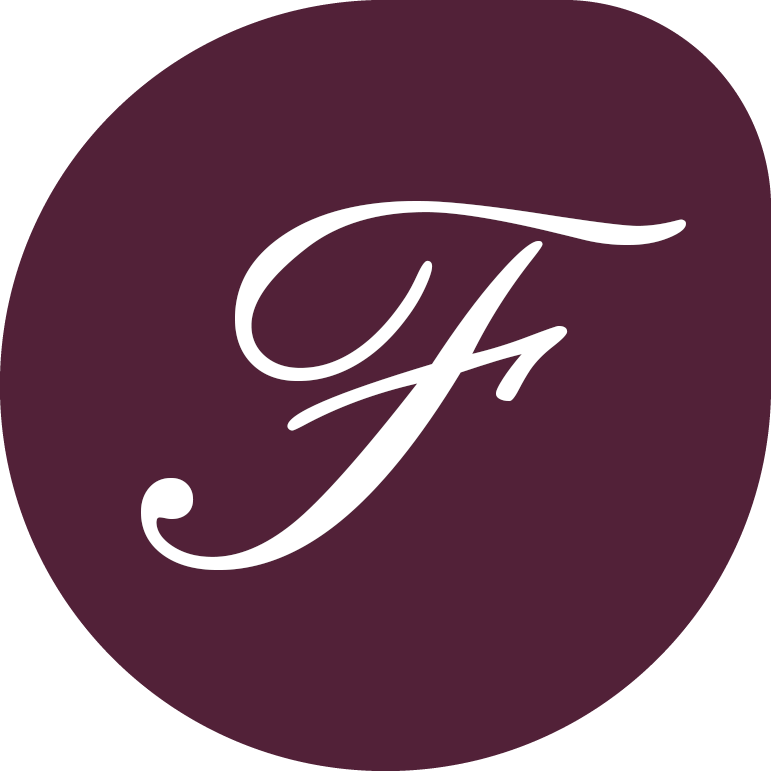
<style>
.page{position:relative;width:771px;height:771px;background:#522138}
.page>*{position:absolute;margin:0}
.t1{font:500px "EmbassyBT-Regular";letter-spacing:-0.025em;color:#ffffff}
</style>
<div class="page">
<p class="t1" style="left:141px;top:201px;width:545px;height:369px">F</p>
</div>
